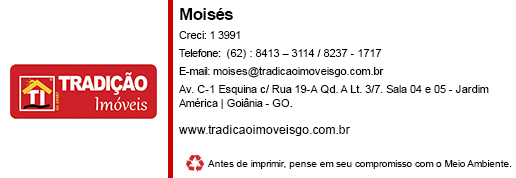
<style>
.page{position:relative;width:516px;height:178px;background:#ffffff}
.page>*{position:absolute;margin:0}
.t1{font:15.8px "Arial-BoldMT";letter-spacing:-0.02em;color:#000000;scale:1.05 1}
.t2{font:11px "ArialMT";letter-spacing:-0.02em;color:#000000}
.t3{font:11px "ArialMT";color:#000000}
.t4{font:11px "ArialMT";letter-spacing:-0.019em;color:#000000}
.t5{font:10.8px "ArialMT";letter-spacing:-0.001em;color:#000000}
.t6{font:10.8px "ArialMT";letter-spacing:-0.024em;color:#000000}
.t7{font:11.4px "ArialMT";letter-spacing:-0.002em;color:#000000}
.t8{font:11.4px "ArialMT";letter-spacing:0.005em;color:#000000}
.t9{font:11.4px "ArialMT";letter-spacing:-0.005em;color:#000000}
.t10{font:10.9px "ArialMT";letter-spacing:-0.001em;color:#000000}
.t11{font:12px "ArialMT";letter-spacing:0.009em;color:#000000}
.t12{font:10.3px "ArialMT";letter-spacing:-0.025em;color:#000000}
.t13{font:10.3px "ArialMT";letter-spacing:-0.015em;color:#000000}
</style>
<div class="page">
<p class="t1" style="left:180px;top:8px;width:53px;height:12px">Moisés</p>
<p class="t2" style="left:179px;top:31px;width:61px;height:8px">Creci: 1 3991</p>
<p class="t3" style="left:178px;top:49px;width:204px;height:10px"><span class="t2">Te</span><span class="t4">lefone:  </span>(62) : 8413 – 3114 / 8237 - 1717</p>
<p class="t5" style="left:179px;top:67px;width:205px;height:11px"><span class="t6">E-mail:</span> moises@tradicaoimoveisgo.com.br</p>
<p class="t7" style="left:179px;top:85px;width:310px;height:10px"><span class="t8">Av. C-1 </span><span class="t9">Esquina c/ Rua </span>19-A Qd. A Lt. 3/7. Sala 04 e 05 - Jardim</p>
<p class="t10" style="left:179px;top:98px;width:113px;height:11px">América | Goiânia - GO.</p>
<p class="t11" style="left:179px;top:125px;width:171px;height:11px">www.tradicaoimoveisgo.com.br</p>
<p class="t12" style="left:207px;top:160px;width:305px;height:9px">Antes de <span class="t13">imprimir, </span>pense em seu compromisso com o Meio Ambiente.</p>
</div>
